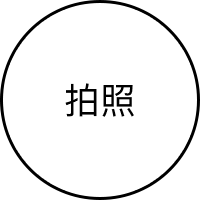
<style>
.page{position:relative;width:200px;height:200px;background:#ffffff}
.page>*{position:absolute;margin:0}
.t1{font:36px "PingFang-SC-Medium";color:#000000}
</style>
<div class="page">
<p class="t1" style="left:65px;top:83px;width:69px;height:34px">拍照</p>
</div>
